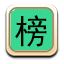
<style>
.page{position:relative;width:64px;height:64px;background:#38d792}
.page>*{position:absolute;margin:0}
.t1{font:34px "SimHei";color:#030300}
</style>
<div class="page">
<p class="t1" style="left:15px;top:15px;width:32px;height:32px">榜</p>
</div>
